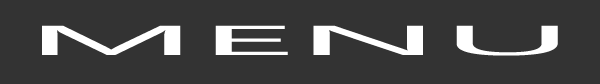
<style>
.page{position:relative;width:600px;height:84px;background:#333333}
.page>*{position:absolute;margin:0}
.t1{font:41.7px "MyanmarText";color:#ffffff;scale:4.64 1}
</style>
<div class="page">
<p class="t1" style="left:42px;top:25px;width:516px;height:31px">MENU</p>
</div>
